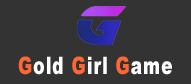
<style>
.page{position:relative;width:191px;height:84px;background:#333333}
.page>*{position:absolute;margin:0}
.t1{font:24.1px "Arial-Black";letter-spacing:0.06em;color:#ffffff;scale:0.71 1}
.t2{font:24.1px "Arial-Black";letter-spacing:0.06em;color:#ff6633;scale:0.71 1}
</style>
<div class="page">
<p class="t1" style="left:18px;top:56px;width:154px;height:19px"><span class="t2">G</span>old <span class="t2">G</span>irl <span class="t2">G</span>ame</p>
</div>
